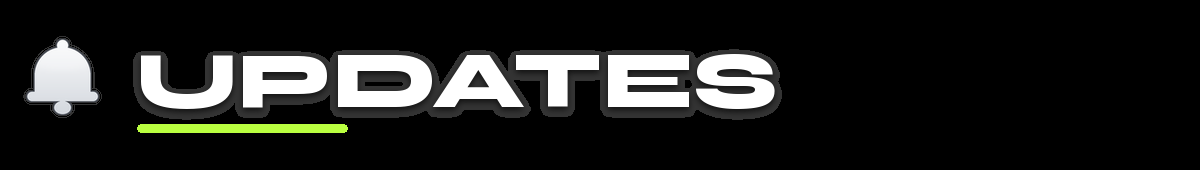
<style>
.page{position:relative;width:1200px;height:170px;background:#000000}
.page>*{position:absolute;margin:0}
.t1{font:80px "Syne-ExtraBold";color:#ffffff}
</style>
<div class="page">
<p class="t1" style="left:141px;top:54px;width:634px;height:55px">UPDATES</p>
</div>
